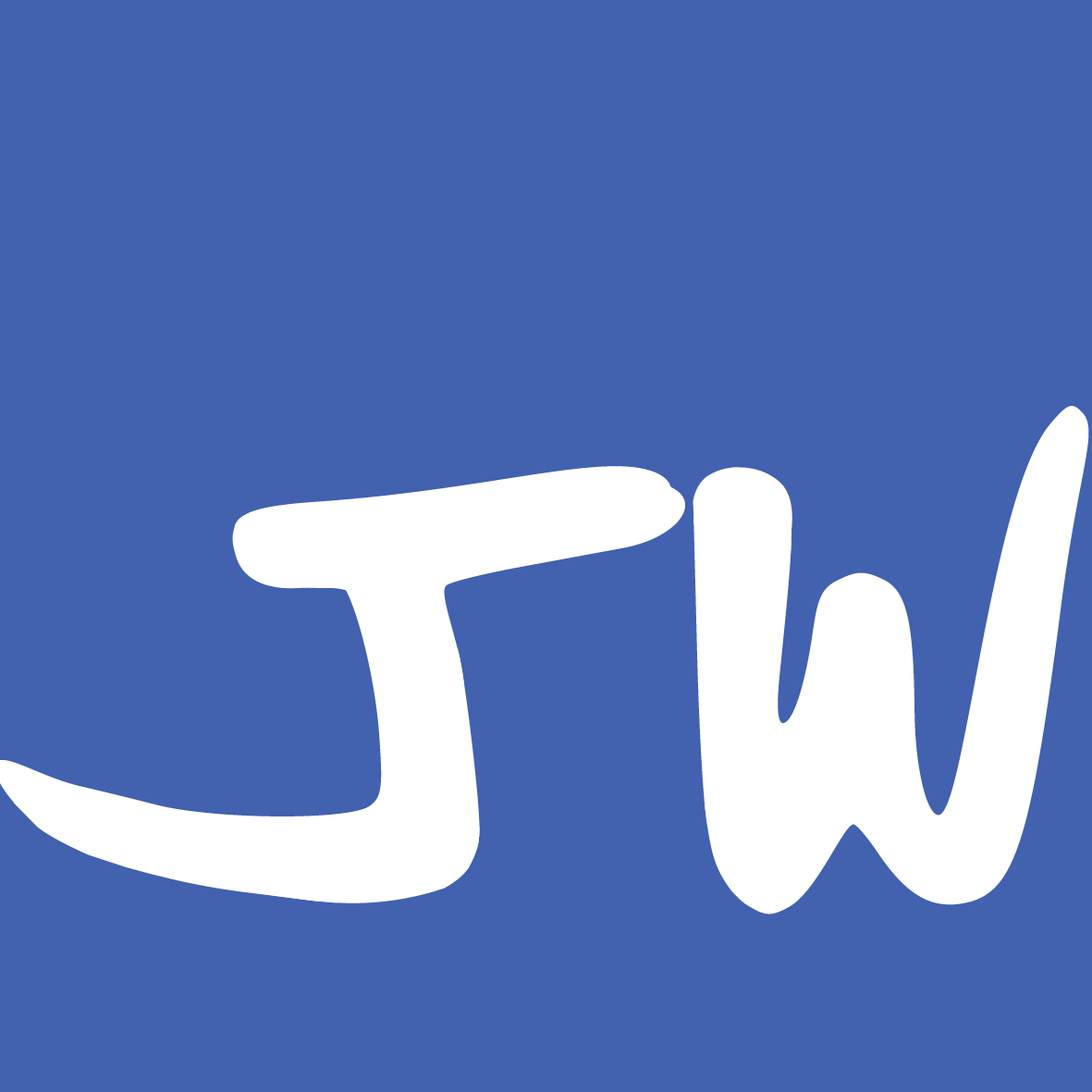
<style>
.page{position:relative;width:1092px;height:1092px;background:#4261af}
.page>*{position:absolute;margin:0}
.t1{font:919.4px "John_Walton_Print";letter-spacing:-0.01em;color:#ffffff}
</style>
<div class="page">
<p class="t1" style="left:7px;top:406px;width:1082px;height:508px">JW</p>
</div>
